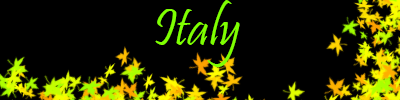
<style>
.page{position:relative;width:400px;height:100px;background:#000000}
.page>*{position:absolute;margin:0}
.t1{font:54px "Pristina-Regular";color:#7fff01}
</style>
<div class="page">
<p class="t1" style="left:155px;top:0px;width:85px;height:67px">Italy</p>
</div>
